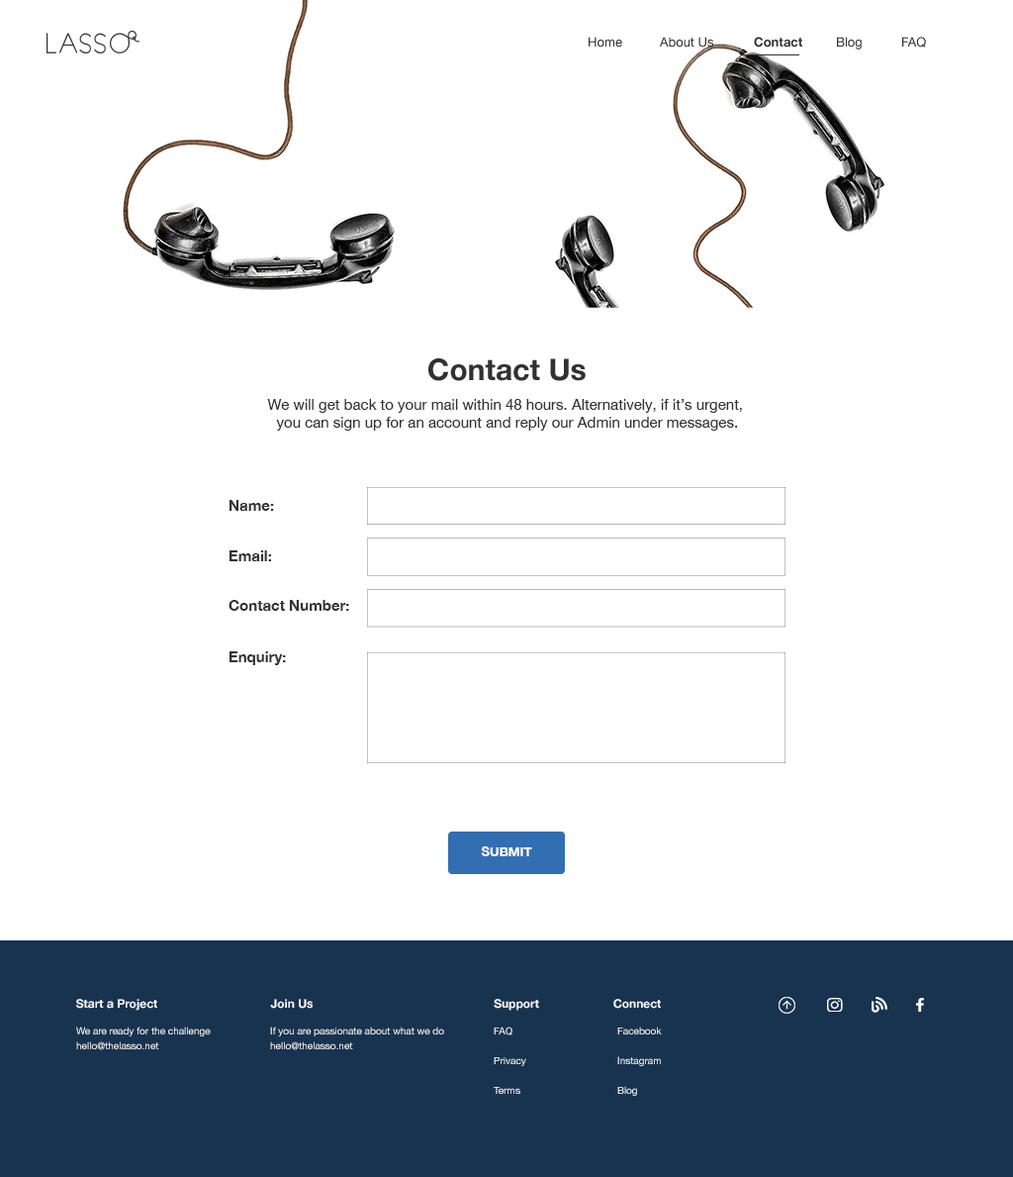
<style>
.page{position:relative;width:1013px;height:1177px;background:#ffffff}
.page>*{position:absolute;margin:0}
.t1{font:12.9px "HelveticaNeue";color:#323031}
.t2{font:12.9px "HelveticaNeue-Bold";color:#323031}
.t3{font:29.7px "HelveticaNeue-Bold";color:#323031}
.t4{font:14.8px "HelveticaNeue";color:#333333}
.t5{font:14.8px "HelveticaNeue-Bold";color:#333333}
.t6{font:12.9px "HelveticaNeue-Bold";color:#ffffff}
.t7{font:11.9px "HelveticaNeue-Bold";color:#f6f6f6}
.t8{font:9.9px/14.8px "HelveticaNeue";color:#f6f6f6}
</style>
<div class="page">
<p class="t1" style="left:589px;top:37px;width:33px;height:11px">Home</p>
<p class="t1" style="left:660px;top:37px;width:55px;height:11px">About Us</p>
<p class="t2" style="left:754px;top:37px;width:49px;height:11px">Contact</p>
<p class="t1" style="left:837px;top:37px;width:25px;height:12px">Blog</p>
<p class="t1" style="left:903px;top:37px;width:23px;height:11px">FAQ</p>
<p class="t3" style="left:429px;top:358px;width:157px;height:23px">Contact Us</p>
<p class="t4" style="left:267px;top:399px;width:475px;height:31px;text-align:center">We will get back to your mail within 48 hours. Alternatively, if it’s urgent, <br>you can sign up for an account and reply our Admin under messages.</p>
<p class="t5" style="left:229px;top:500px;width:45px;height:11px">Name:</p>
<p class="t5" style="left:229px;top:550px;width:43px;height:11px">Email:</p>
<p class="t5" style="left:229px;top:600px;width:120px;height:11px">Contact Number:</p>
<p class="t5" style="left:229px;top:651px;width:57px;height:14px">Enquiry:</p>
<p class="t6" style="left:481px;top:846px;width:51px;height:10px">SUBMIT</p>
<p class="t7" style="left:76px;top:999px;width:81px;height:11px">Start a Project</p>
<p class="t7" style="left:270px;top:999px;width:43px;height:9px">Join Us</p>
<p class="t7" style="left:494px;top:999px;width:45px;height:11px">Support</p>
<p class="t7" style="left:614px;top:999px;width:47px;height:9px">Connect</p>
<p class="t8" style="left:76px;top:1026px;width:135px;height:24px">We are ready for the challenge<br>hello@thelasso.net</p>
<p class="t8" style="left:270px;top:1026px;width:174px;height:24px">If you are passionate about what we do<br>hello@thelasso.net</p>
<p class="t8" style="left:494px;top:1026px;width:32px;height:68px">FAQ<br><br>Privacy<br><br>Terms</p>
<p class="t8" style="left:618px;top:1026px;width:44px;height:70px">Facebook<br><br>Instagram<br><br>Blog</p>
</div>
